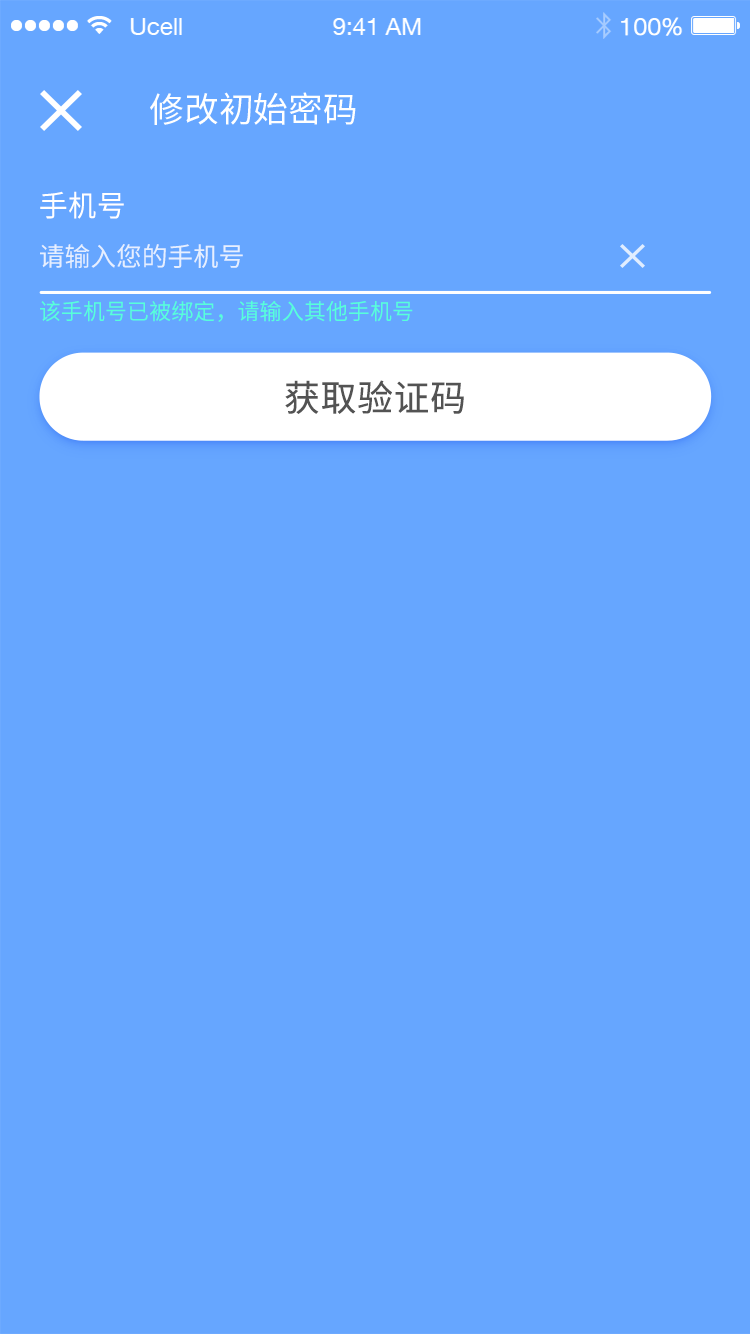
<style>
.page{position:relative;width:750px;height:1334px;background:#66a6ff}
.page>*{position:absolute;margin:0}
.t1{font:34.9px "NotoSansHans-Regular";color:#ffffff}
.t2{font:29.3px "NotoSansHans-Regular";color:#ffffff;text-transform:uppercase}
.t3{font:26px "NotoSansHans-Regular";color:#e6efff;text-transform:uppercase}
.t4{font:22.2px "NotoSansHans-Regular";color:#57ffda;text-transform:uppercase}
.t5{font:36.1px "NotoSansHans-Regular";letter-spacing:0.02em;color:#535353}
</style>
<div class="page">
<p class="t1" style="left:150px;top:92px;width:206px;height:33px">修改初始密码</p>
<p class="t2" style="left:40px;top:191px;width:84px;height:28px">手机号</p>
<p class="t3" style="left:40px;top:244px;width:203px;height:25px">请输入您的手机号</p>
<p class="t4" style="left:40px;top:300px;width:373px;height:22px">该手机号已被绑定，请输入其他手机号</p>
<p class="t5" style="left:285px;top:380px;width:179px;height:34px">获取验证码</p>
</div>
